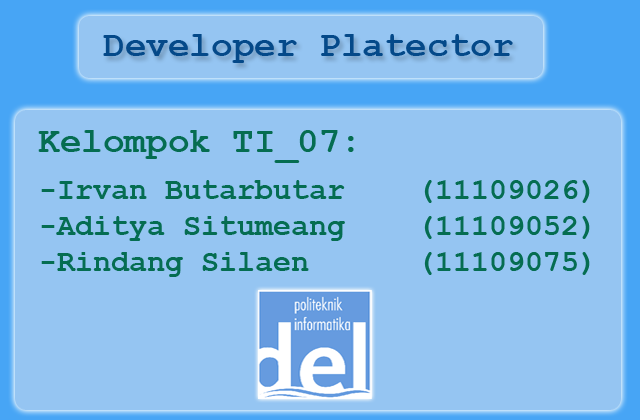
<style>
.page{position:relative;width:640px;height:420px;background:#95c5f2}
.page>*{position:absolute;margin:0}
.t1{font:36px "CourierNewPS-BoldMT";color:#044989}
.t2{font:36px "CourierNewPS-BoldMT";color:#056d51}
.t3{font:30px "CourierNewPS-BoldMT";color:#056d51}
</style>
<div class="page">
<p class="t1" style="left:103px;top:34px;width:410px;height:29px">Developer Platector</p>
<p class="t2" style="left:38px;top:130px;width:316px;height:33px">Kelompok TI_07:</p>
<p class="t3" style="left:41px;top:180px;width:549px;height:97px">-Irvan Butarbutar    (11109026)<br>-Aditya Situmeang    (11109052)<br>-Rindang Silaen      (11109075)</p>
</div>
